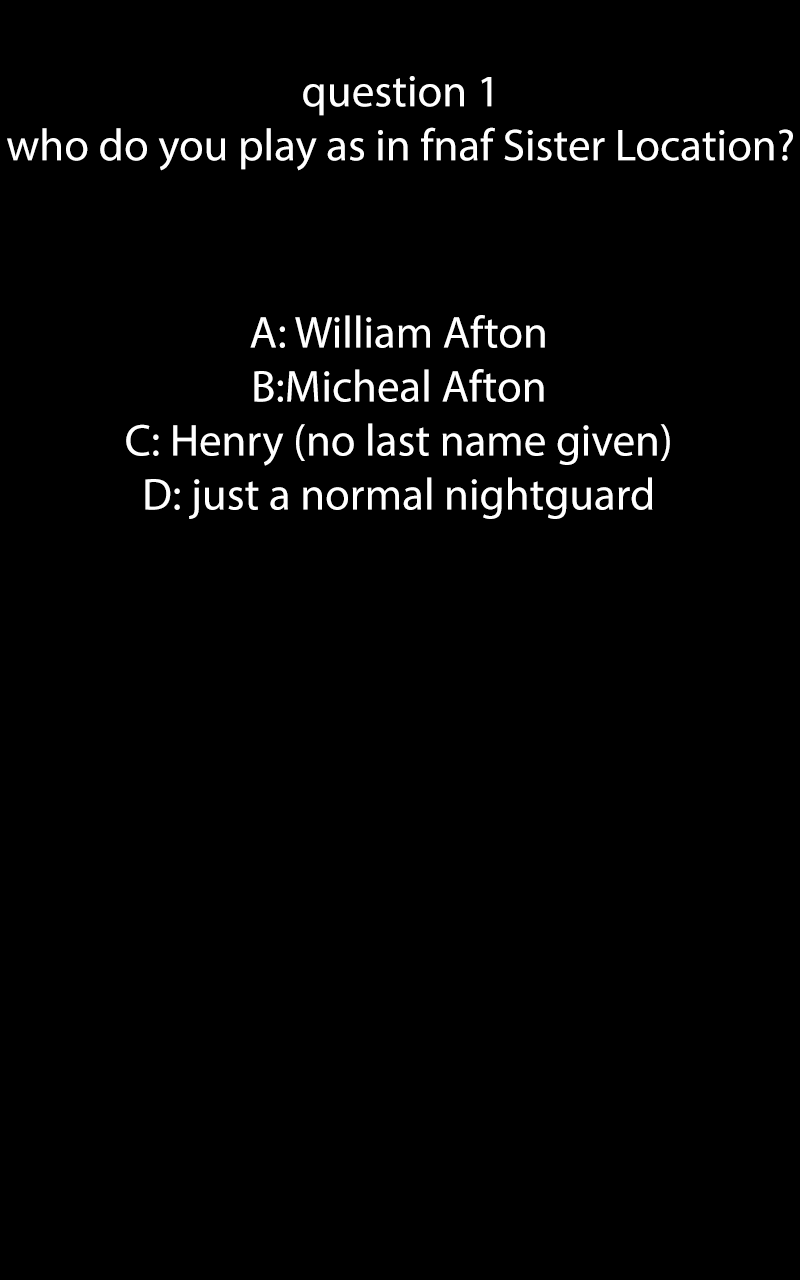
<style>
.page{position:relative;width:800px;height:1280px;background:#000000}
.page>*{position:absolute;margin:0}
.t1{font:45px "MyriadPro-Regular";color:#ffffff}
</style>
<div class="page">
<p class="t1" style="left:7px;top:76px;width:786px;height:95px;text-align:center">question 1<br>who do you play as in fnaf Sister Location?</p>
<p class="t1" style="left:126px;top:315px;width:544px;height:204px;text-align:center">A: William Afton<br>B:Micheal Afton<br>C: Henry (no last name given)<br>D: just a normal nightguard</p>
</div>
